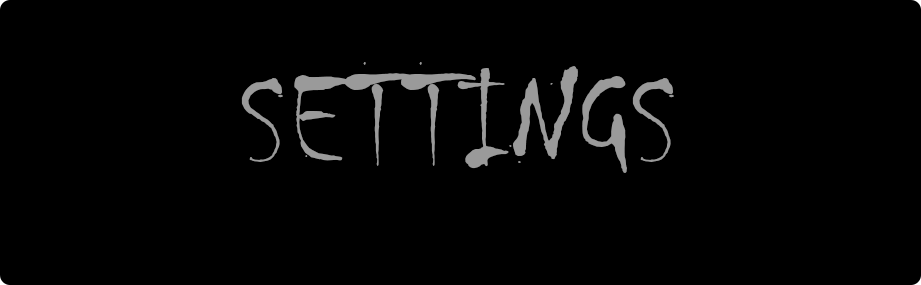
<style>
.page{position:relative;width:921px;height:285px;background:#000000}
.page>*{position:absolute;margin:0}
.t1{font:141.7px "Chiller-Regular";color:#9a9a9a}
</style>
<div class="page">
<p class="t1" style="left:241px;top:62px;width:433px;height:111px">SETTINGS</p>
</div>
